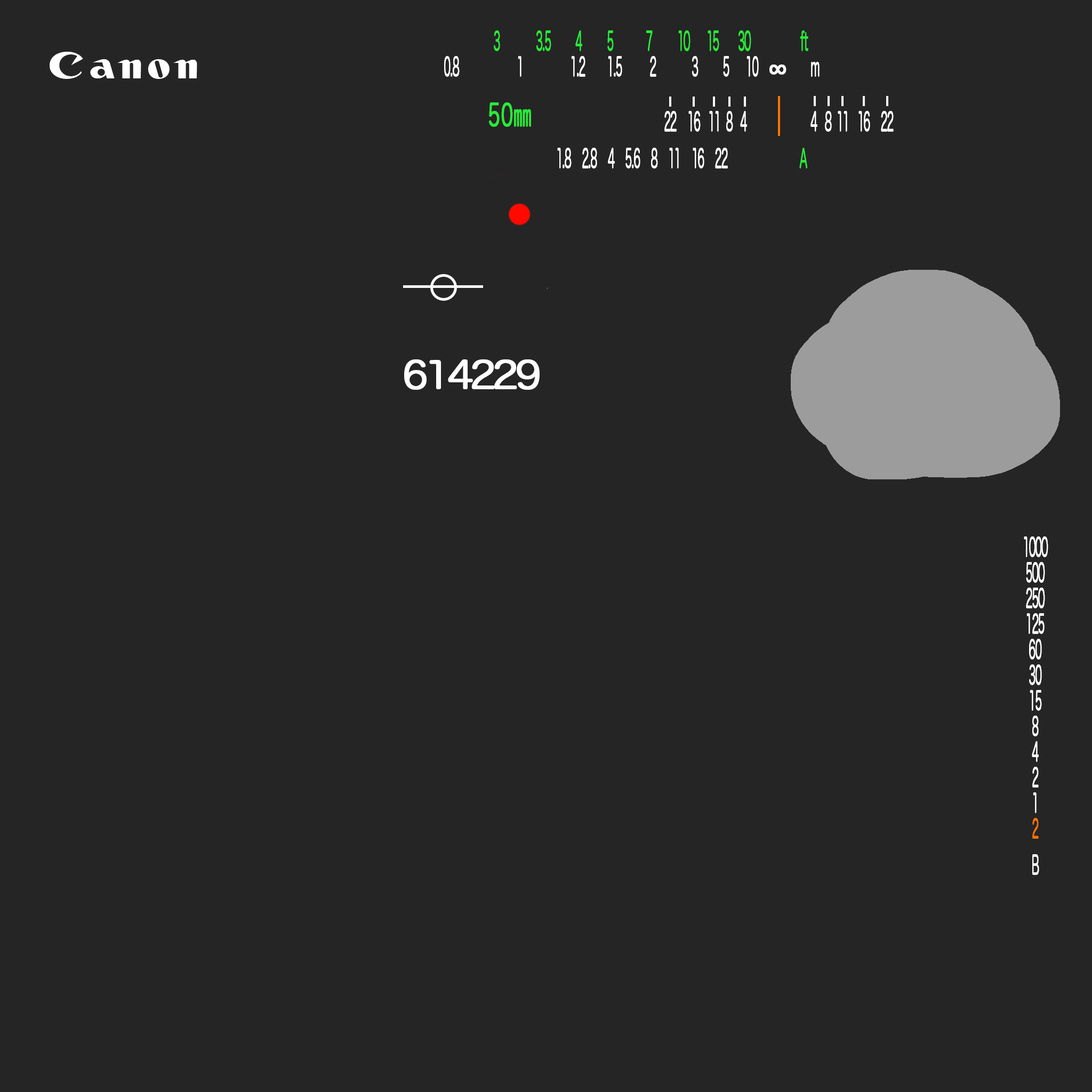
<style>
.page{position:relative;width:1092px;height:1092px;background:#252525}
.page>*{position:absolute;margin:0}
.t1{font:25.6px "HiraMaruPro-W4";letter-spacing:-0.1em;color:#ffffff;font-weight:bold;scale:0.42 1}
.t2{font:25.6px "HiraMaruPro-W4";letter-spacing:-0.1em;color:#29ea39;font-weight:bold;scale:0.42 1}
.t3{font:25.6px "HiraMaruPro-W4";letter-spacing:-0.1em;color:#ffffff;font-weight:bold}
.t4{font:39.1px "Canon";letter-spacing:0.14em;color:#ffffff;scale:1.08 1}
.t5{font:29.9px "HiraMaruPro-W4";color:#29ea39;font-weight:bold;scale:0.62 1}
.t6{font:37.1px "HiraMaruPro-W4";letter-spacing:-0.1em;color:#ffffff;font-weight:bold;scale:1.05 1}
.t7{font:25.6px "HiraMaruPro-W4";letter-spacing:-0.1em;color:#ff7500;font-weight:bold;scale:0.42 1}
.t8{font:25.6px "HiraMaruPro-W4";letter-spacing:-0.1em;color:#fefefe;font-weight:bold;scale:0.42 1}
</style>
<div class="page">
<p class="t1" style="left:444px;top:30px;width:376px;height:47px;text-align:justify"><span class="t2">                  3             3.5         4         5            7         10      15       30                  ft</span> <br>0.8                     1                 1.2        1.5          2             3         5      10    <span class="t3">∞ </span>       m</p>
<p class="t4" style="left:50px;top:52px;width:147px;height:27px">Canon</p>
<p class="t5" style="left:489px;top:102px;width:42px;height:25px">50mm</p>
<p class="t1" style="left:664px;top:111px;width:230px;height:21px">22    16   11  8   4                       4   8  11   16    22</p>
<p class="t1" style="left:557px;top:148px;width:250px;height:20px">1.8    2.8    4    5.6    8    11    16    22 <span class="t2">                         A</span></p>
<p class="t6" style="left:404px;top:359px;width:136px;height:31px">614229</p>
<p class="t1" style="left:1024px;top:536px;width:24px;height:339px;text-align:center">1000<br>500<br>250<br>125<br>60<br>30<br>15<br>8<br>4<br>2<br>1<br><span class="t7">2<br><br></span><span class="t8">B</span></p>
</div>
